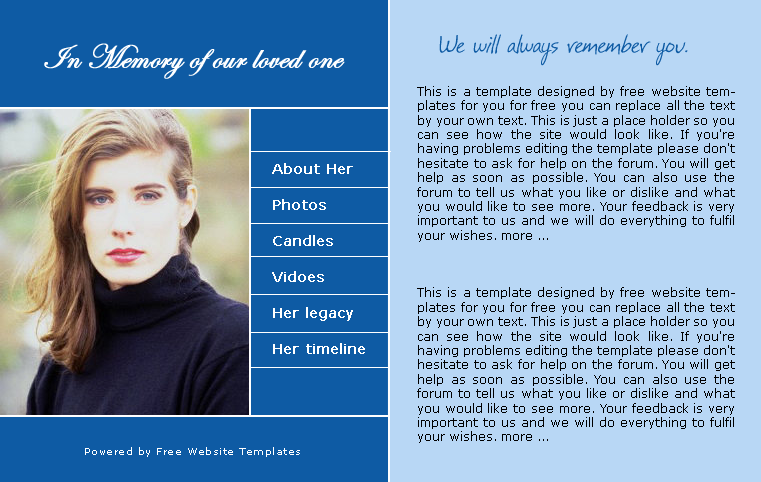
<style>
.page{position:relative;width:761px;height:482px;background:#b8d7f5}
.page>*{position:absolute;margin:0}
.t1{font:24px "Festus";color:#0e5ba4}
.t2{font:34px "EdwardianScriptITC";color:#ffffff;font-weight:bold}
.t3{font:12px "Verdana";color:#000000}
.t4{font:14px/18px "Verdana";color:#ffffff;font-weight:bold}
.t5{font:10px "Verdana";letter-spacing:0.05em;color:#ffffff}
</style>
<div class="page">
<p class="t1" style="left:439px;top:34px;width:249px;height:32px">We will always remember you.</p>
<p class="t2" style="left:44px;top:43px;width:301px;height:36px">In Memory of our loved one</p>
<p class="t3" style="left:417px;top:86px;width:318px;height:357px;text-align:justify">This is a template designed by free website templates for you for free you can replace all the text by your own text. This is just a place holder so you can see how the site would look like. If you're having problems editing the template please don't hesitate to ask for help on the forum. You will get help as soon as possible. You can also use the forum to tell us what you like or dislike and what you would like to see more. Your feedback is very important to us and we will do everything to fulfil your wishes. more ... <br><br><br><br>This is a template designed by free website templates for you for free you can replace all the text by your own text. This is just a place holder so you can see how the site would look like. If you're having problems editing the template please don't hesitate to ask for help on the forum. You will get help as soon as possible. You can also use the forum to tell us what you like or dislike and what you would like to see more. Your feedback is very important to us and we will do everything to fulfil your wishes. more ...</p>
<p class="t4" style="left:272px;top:163px;width:93px;height:191px">About Her<br><br>Photos<br><br>Candles<br><br>Vidoes<br><br>Her legacy<br><br>Her timeline</p>
<p class="t5" style="left:85px;top:447px;width:215px;height:10px">Powered by Free Website Templates</p>
</div>
